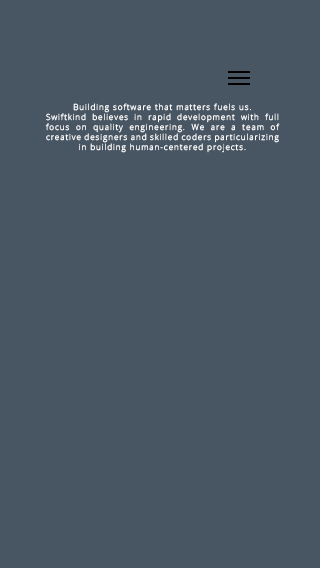
<style>
.page{position:relative;width:320px;height:568px;background:#485563}
.page>*{position:absolute;margin:0}
.t1{font:8.3px "OpenSans-Light";letter-spacing:0.1em;color:#ffffff}
</style>
<div class="page">
<p class="t1" style="left:45px;top:103px;width:235px;height:50px;text-align:justify">Building software that matters fuels us. <br>Swiftkind believes in rapid development with full focus on quality engineering. We are a team of creative designers and skilled coders particularizing in building human-centered projects.</p>
</div>
